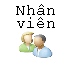
<style>
.page{position:relative;width:71px;height:58px;background:#ffffff}
.page>*{position:absolute;margin:0}
.t1{font:12px/13.3px "CourierNewPSMT";color:#000000}
</style>
<div class="page">
<p class="t1" style="left:16px;top:4px;width:39px;height:24px;text-align:center">Nhân<br>viên</p>
</div>
